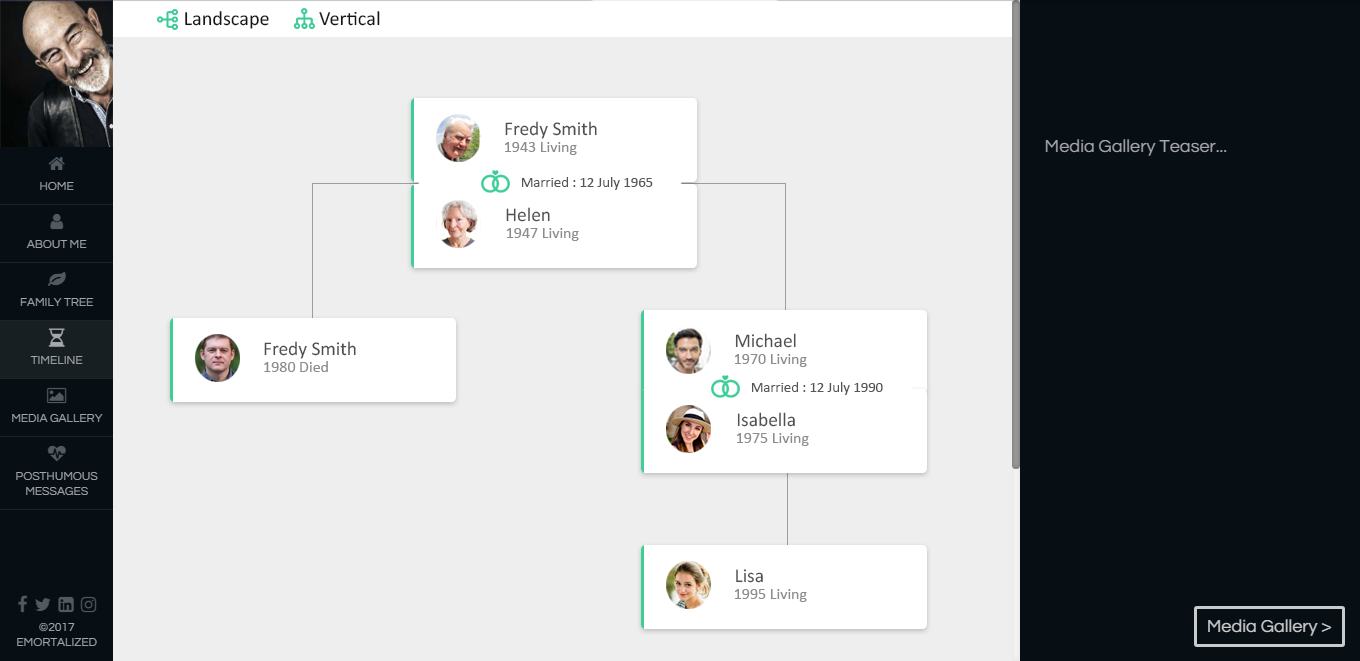
<style>
.page{position:relative;width:1360px;height:661px;background:#eeeeee}
.page>*{position:absolute;margin:0}
.t1{font:20.3px "Calibri";color:#161616}
.t2{font:19.5px "Calibri";color:#505050}
.t3{font:16px "Calibri";color:#8c8c8c}
.t4{font:14.7px "Calibri";color:#525252}
</style>
<div class="page">
<p class="t1" style="left:185px;top:11px;width:84px;height:18px">Landscape</p>
<p class="t1" style="left:319px;top:11px;width:61px;height:15px">Vertical</p>
<p class="t2" style="left:505px;top:121px;width:92px;height:18px">Fredy Smith</p>
<p class="t3" style="left:505px;top:142px;width:72px;height:13px">1943 Living</p>
<p class="t4" style="left:522px;top:177px;width:131px;height:13px">Married : 12 July 1965</p>
<p class="t2" style="left:506px;top:207px;width:44px;height:15px">Helen</p>
<p class="t3" style="left:507px;top:228px;width:72px;height:13px">1947 Living</p>
<p class="t2" style="left:264px;top:341px;width:92px;height:18px">Fredy Smith</p>
<p class="t2" style="left:735px;top:333px;width:61px;height:15px">Michael</p>
<p class="t3" style="left:264px;top:361px;width:64px;height:11px">1980 Died</p>
<p class="t3" style="left:735px;top:354px;width:72px;height:13px">1970 Living</p>
<p class="t4" style="left:752px;top:382px;width:131px;height:13px">Married : 12 July 1990</p>
<p class="t2" style="left:737px;top:412px;width:58px;height:15px">Isabella</p>
<p class="t3" style="left:737px;top:433px;width:72px;height:13px">1975 Living</p>
<p class="t2" style="left:736px;top:569px;width:27px;height:14px">Lisa</p>
<p class="t3" style="left:735px;top:589px;width:72px;height:13px">1995 Living</p>
</div>
